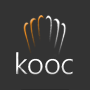
<style>
.page{position:relative;width:90px;height:90px;background:#333333}
.page>*{position:absolute;margin:0}
.t1{font:29.6px "NirmalaUI-Semilight";color:#ffffff}
</style>
<div class="page">
<p class="t1" style="left:16px;top:52px;width:57px;height:23px">kooc</p>
</div>
